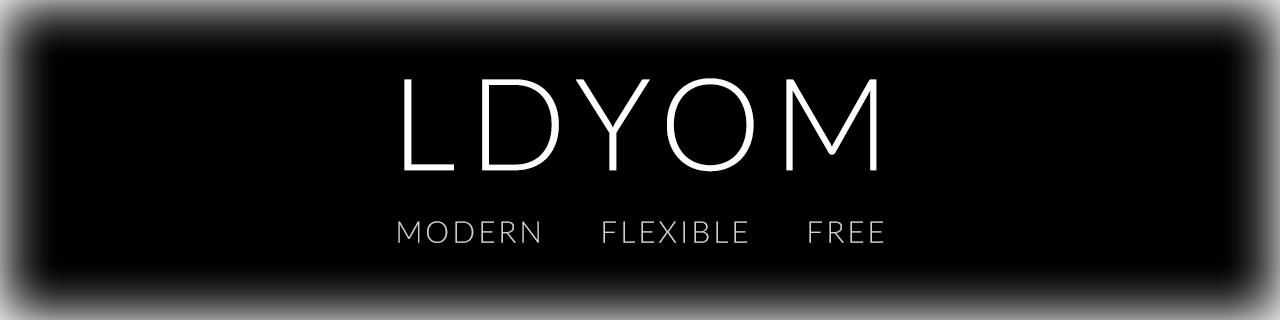
<style>
.page{position:relative;width:1280px;height:320px;background:#000000}
.page>*{position:absolute;margin:0}
.t1{font:128px "Lato-Light";letter-spacing:0.1em;color:#ffffff;text-transform:uppercase}
.t2{font:30px "Lato-Light";letter-spacing:0.1em;color:#cfcfcf;text-transform:uppercase}
</style>
<div class="page">
<p class="t1" style="left:404px;top:78px;width:473px;height:94px">LDYOM</p>
<p class="t2" style="left:398px;top:221px;width:486px;height:22px">Modern     Flexible     Free</p>
</div>
